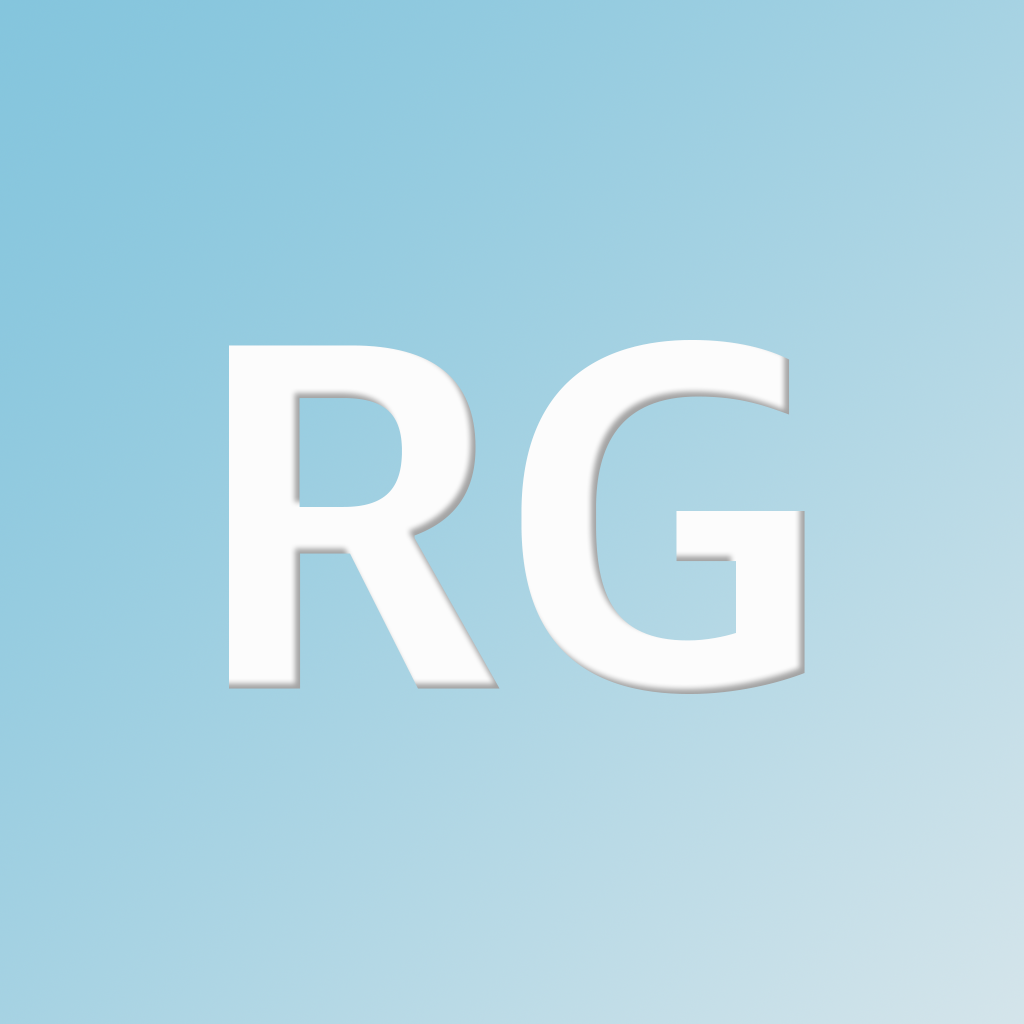
<style>
.page{position:relative;width:1024px;height:1024px}
.page>*{position:absolute;margin:0}
.t1{font:500px "AppleSDGothicNeo-ExtraBold";color:#fcfcfc}
.t2{font:200px "MyriadPro-Regular";color:#d83737}
</style>
<div class="page">
<p class="t1" style="left:229px;top:340px;width:576px;height:354px"><span class="t2"><br></span>RG</p>
</div>
